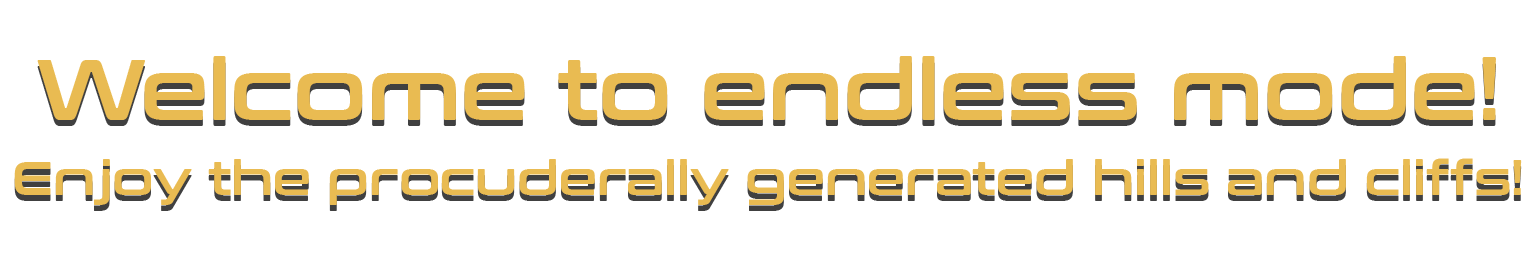
<style>
.page{position:relative;width:1536px;height:256px;background:#ffffff}
.page>*{position:absolute;margin:0}
.t1{font:48px/100px "ConthraxSb-Regular";color:#e9bb52}
.t2{font:85px/100px "ConthraxSb-Regular";color:#e9bb52}
</style>
<div class="page">
<p class="t1" style="left:14px;top:56px;width:1508px;height:149px;text-align:center"><span class="t2">Welcome to endless mode!<br></span>Enjoy the procuderally generated hills and cliffs!</p>
</div>
